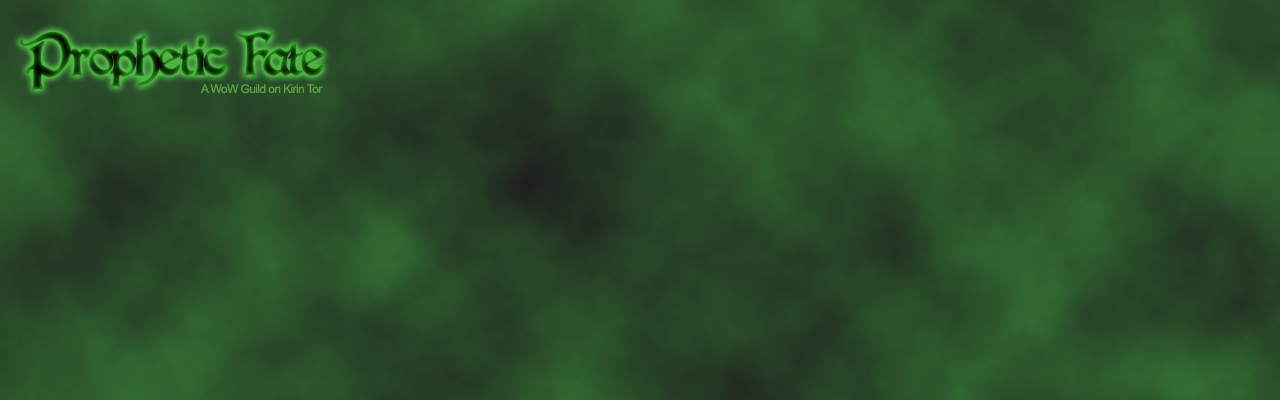
<style>
.page{position:relative;width:1280px;height:400px}
.page>*{position:absolute;margin:0}
.t1{font:48px "BoisterBlack";letter-spacing:-0.05em}
.t2{font:12px "ArialMT";letter-spacing:-0.05em;color:#58a442}
</style>
<div class="page">
<p class="t1" style="left:19px;top:31px;width:306px;height:60px">Prophetic Fate</p>
<p class="t2" style="left:200px;top:84px;width:123px;height:10px">A WoW Guild on Kirin Tor</p>
</div>
